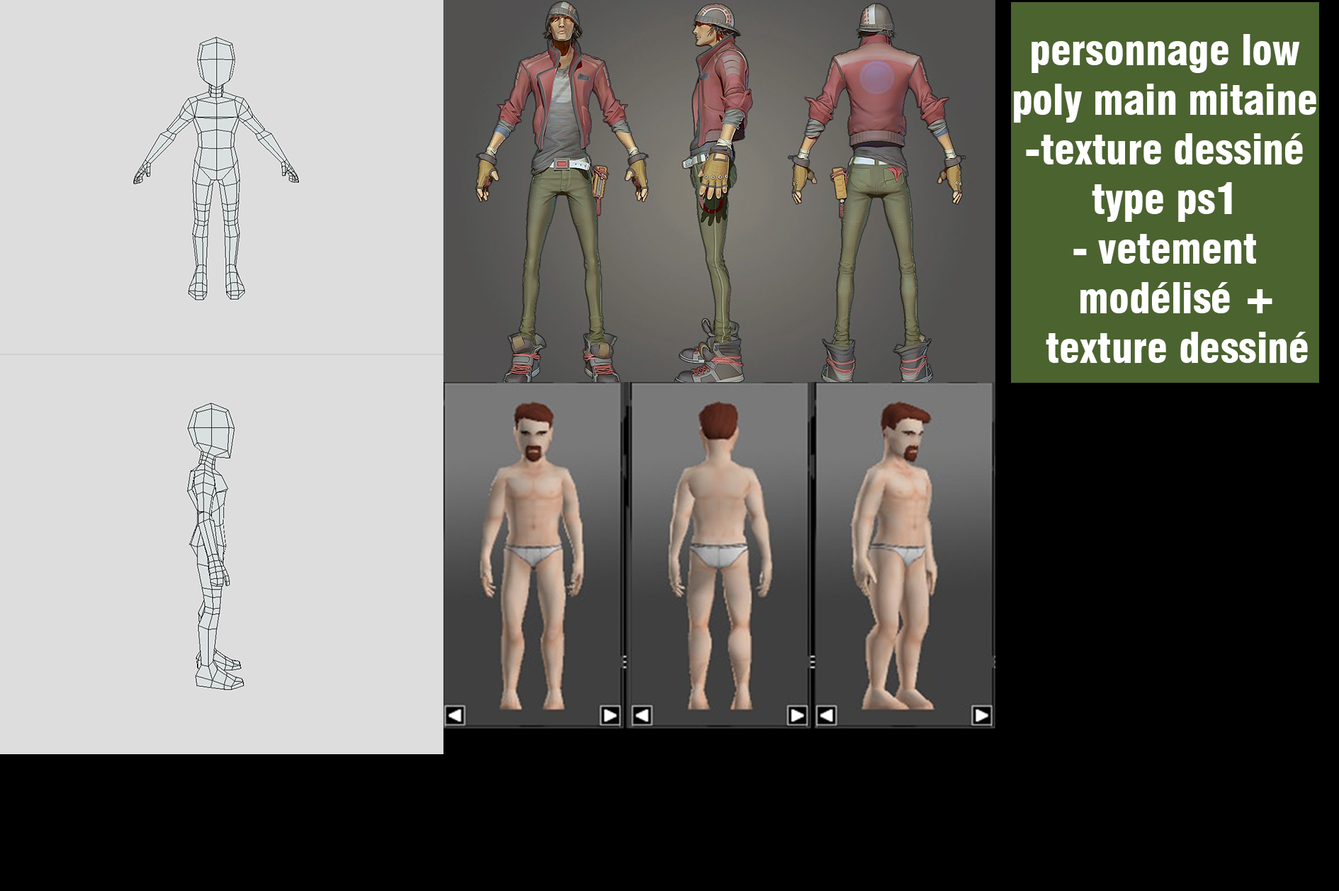
<style>
.page{position:relative;width:1339px;height:891px;background:#000000}
.page>*{position:absolute;margin:0}
.t1{font:41.3px "Swiss721BT-BlackCondensed";color:#ffffff}
</style>
<div class="page">
<p class="t1" style="left:1014px;top:34px;width:302px;height:329px;text-align:center">personnage low poly main mitaine <br>-texture dessiné type ps1             <br>vetement modélisé + texture dessiné</p>
</div>
